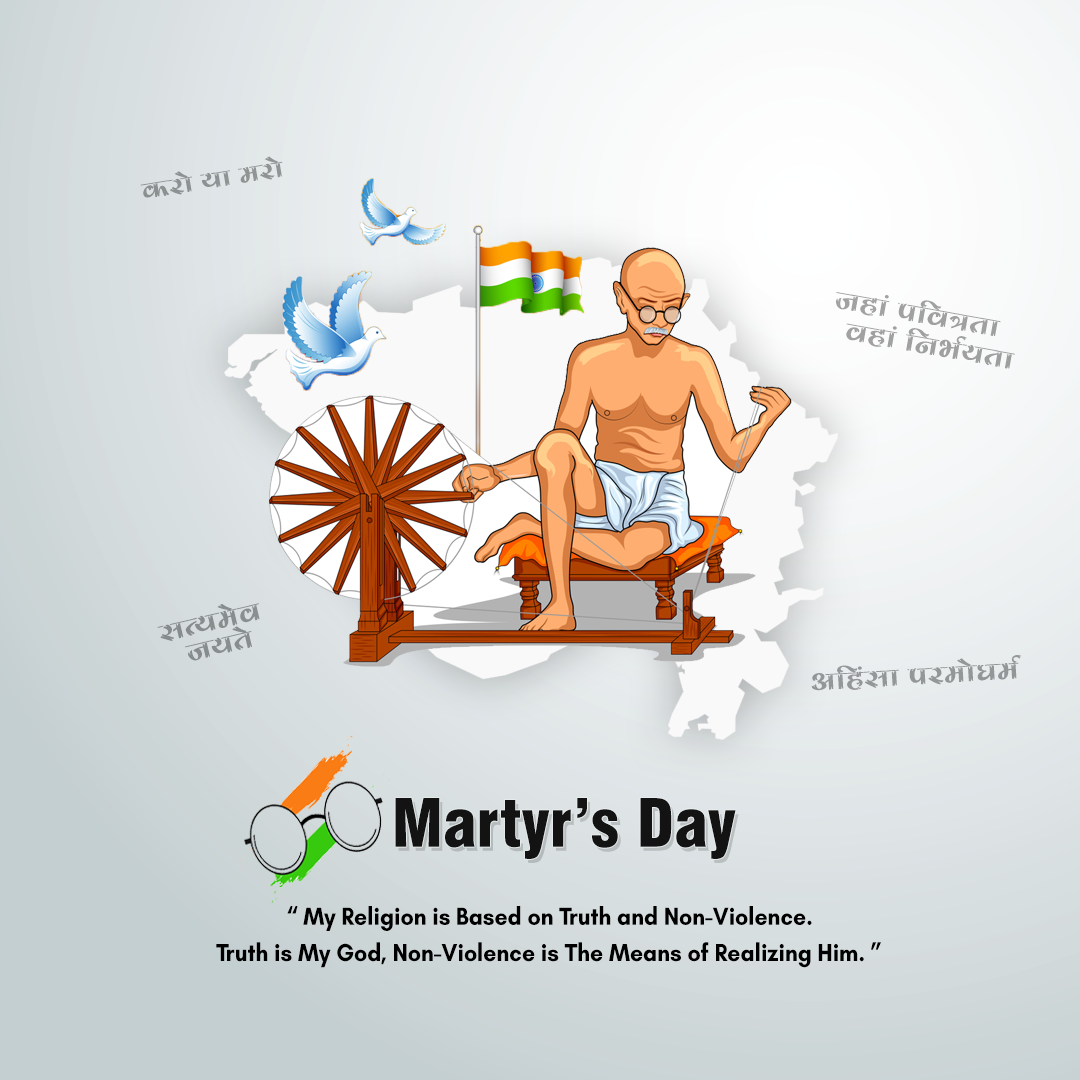
<style>
.page{position:relative;width:1080px;height:1080px}
.page>*{position:absolute;margin:0}
.t1{font:27.3px "EKLH-24";color:#8e9293}
.t2{font:29.7px/29.4px "EKLH-24";color:#a0a0a0}
.t3{font:29.6px/25.3px "EKLH-24";color:#888d8e}
.t4{font:29.2px "EKLH-24";color:#949797}
.t5{font:64.7px "Swiss721BT-BlackCondensed";color:#131313}
.t6{font:25px/36.3px "GlacialIndifference-Bold";color:#000000;scale:0.92 1}
</style>
<div class="page">
<p class="t1" style="left:140px;top:156px;width:143px;height:42px;rotate:-9deg">fhtu gtt bthtu</p>
<p class="t2" style="left:836px;top:292px;width:179px;height:77px;text-align:center;rotate:10deg">stntk vtrJt*t;tt <br>   Jtntk rltCtogt;tt</p>
<p class="t3" style="left:157px;top:603px;width:103px;height:58px;text-align:center;rotate:-13deg">mt;gtbtuJt <br>stgt;tu</p>
<p class="t4" style="left:811px;top:655px;width:211px;height:36px;rotate:-3deg">yrnkmtt vthbttuDtbto</p>
<p class="t5" style="left:395px;top:798px;width:341px;height:61px">Martyr’s Day</p>
<p class="t6" style="left:216px;top:906px;width:665px;height:62px;text-align:center">“ My Religion is Based on Truth and Non-Violence.<br>Truth is My God, Non-Violence is The Means of Realizing Him. ”</p>
</div>
